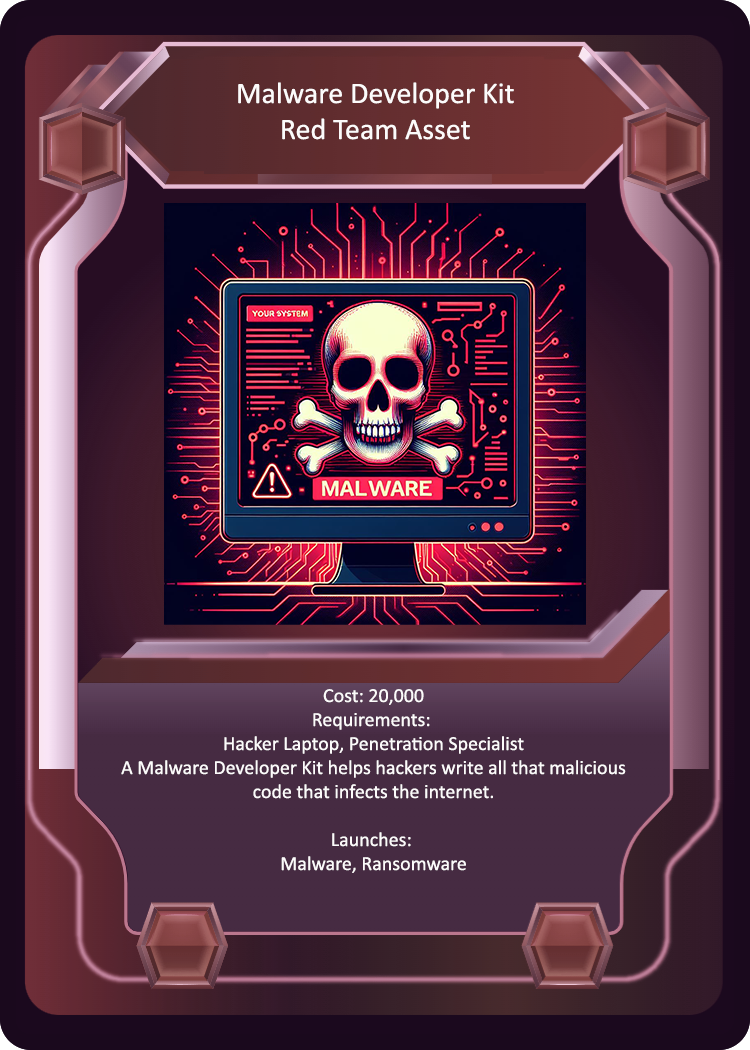
<style>
.page{position:relative;width:750px;height:1050px}
.page>*{position:absolute;margin:0}
.t1{font:30px "Calibri";color:#fcfbfb}
.t2{font:20px "Calibri";color:#fcfbfb}
</style>
<div class="page">
<p class="t1" style="left:238px;top:82px;width:276px;height:58px;text-align:center">Malware Developer Kit<br>Red Team Asset</p>
<p class="t2" style="left:121px;top:689px;width:505px;height:184px;text-align:center">Cost: 20,000<br>Requirements: <br>Hacker Laptop, Penetration Specialist<br>A Malware Developer Kit helps hackers write all that malicious<br>code that infects the internet.<br><br>Launches: <br>Malware, Ransomware</p>
</div>
